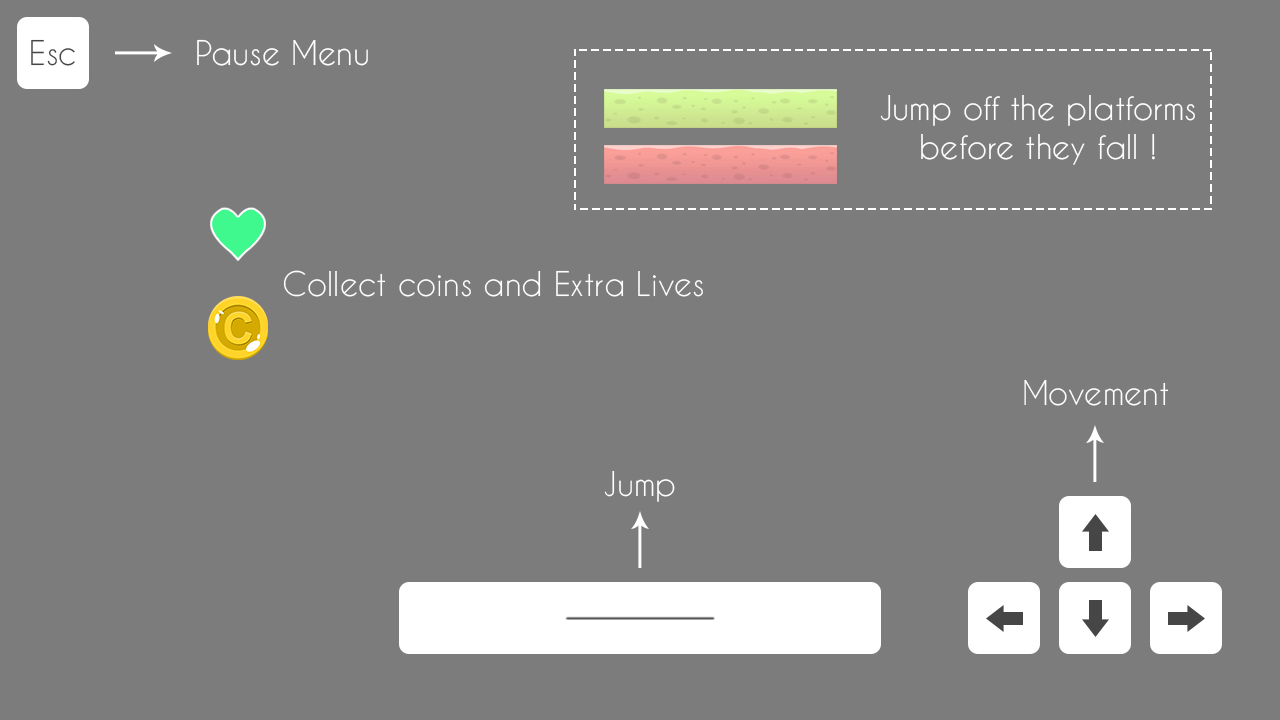
<style>
.page{position:relative;width:1280px;height:720px;background:#7c7c7c}
.page>*{position:absolute;margin:0}
.t1{font:32px "CaviarDreams";color:#464646}
.t2{font:32px "CaviarDreams";color:#ffffff}
</style>
<div class="page">
<p class="t1" style="left:31px;top:39px;width:44px;height:27px">Esc</p>
<p class="t2" style="left:197px;top:39px;width:171px;height:27px">Pause Menu</p>
<p class="t2" style="left:880px;top:94px;width:315px;height:71px;text-align:center">Jump off the platforms<br>before they fall !</p>
</div>
